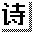
<style>
.page{position:relative;width:32px;height:32px;background:#ffffff}
.page>*{position:absolute;margin:0}
.t1{font:24px "Fusion-Pixel-12px-Proportional-zh_hans-Regular";color:#000000}
</style>
<div class="page">
<p class="t1" style="left:2px;top:3px;width:22px;height:22px">诗</p>
<p class="t1" style="left:3px;top:3px;width:22px;height:22px">诗</p>
</div>
